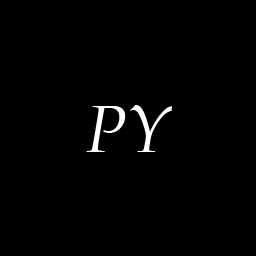
<style>
.page{position:relative;width:256px;height:256px;background:#000000}
.page>*{position:absolute;margin:0}
.t1{font:66.7px "BookAntiqua-Italic";color:#ffffff}
</style>
<div class="page">
<p class="t1" style="left:86px;top:105px;width:86px;height:47px">PY</p>
</div>
